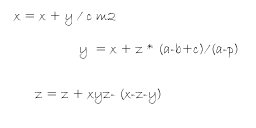
<style>
.page{position:relative;width:256px;height:128px;background:#ffffff}
.page>*{position:absolute;margin:0}
.t1{font:14px "BradleyHandITC"}
.t2{font:14px "BradleyHandITC";color:#000000}
</style>
<div class="page">
<p class="t1" style="left:13px;top:11px;width:103px;height:15px">x = x + y / c m2</p>
<p class="t2" style="left:79px;top:43px;width:159px;height:16px">y  = x + z * (a-b+c)/(a-p)</p>
<p class="t1" style="left:34px;top:88px;width:127px;height:16px">z = z + xyz- (x-z-y)</p>
</div>
